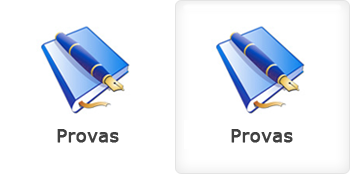
<style>
.page{position:relative;width:350px;height:175px;background:#ffffff}
.page>*{position:absolute;margin:0}
.t1{font:18px "Verdana";color:#404040;font-weight:bold}
</style>
<div class="page">
<p class="t1" style="left:57px;top:129px;width:62px;height:14px">Provas</p>
<p class="t1" style="left:231px;top:129px;width:62px;height:14px">Provas</p>
</div>
